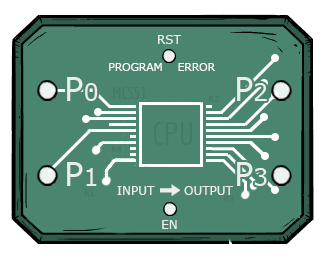
<style>
.page{position:relative;width:325px;height:261px;background:#4a8570}
.page>*{position:absolute;margin:0}
.t1{font:12px "Verdana";color:#ececec}
.t2{font:10.7px "Verdana";color:#ffffff}
.t3{font:32px/42.7px "Verdana";color:#ececec}
.t4{font:24px/42.7px "Verdana";color:#ececec}
.t5{font:16px "Economica-Regular";color:#437a66}
.t6{font:8px "Verdana";color:#437a66}
.t7{font:32px "Economica-Regular";color:#437a66}
</style>
<div class="page">
<p class="t1" style="left:158px;top:35px;width:23px;height:9px">RST</p>
<p class="t2" style="left:109px;top:63px;width:107px;height:8px">PROGRAM    ERROR</p>
<p class="t3" style="left:67px;top:77px;width:200px;height:109px">P<span class="t4">0</span>            P<span class="t4">2<br></span><br>P<span class="t4">1</span>            P<span class="t4">3</span></p>
<p class="t5" style="left:113px;top:87px;width:33px;height:12px">MCS51</p>
<p class="t6" style="left:209px;top:95px;width:10px;height:8px">R2</p>
<p class="t7" style="left:154px;top:122px;width:38px;height:23px">CPU</p>
<p class="t6" style="left:111px;top:145px;width:11px;height:8px">R4</p>
<p class="t6" style="left:84px;top:189px;width:11px;height:8px">R1</p>
<p class="t1" style="left:117px;top:186px;width:116px;height:9px">INPUT       OUTPUT</p>
<p class="t6" style="left:223px;top:195px;width:11px;height:8px">R3</p>
<p class="t1" style="left:162px;top:220px;width:15px;height:9px">EN</p>
</div>
